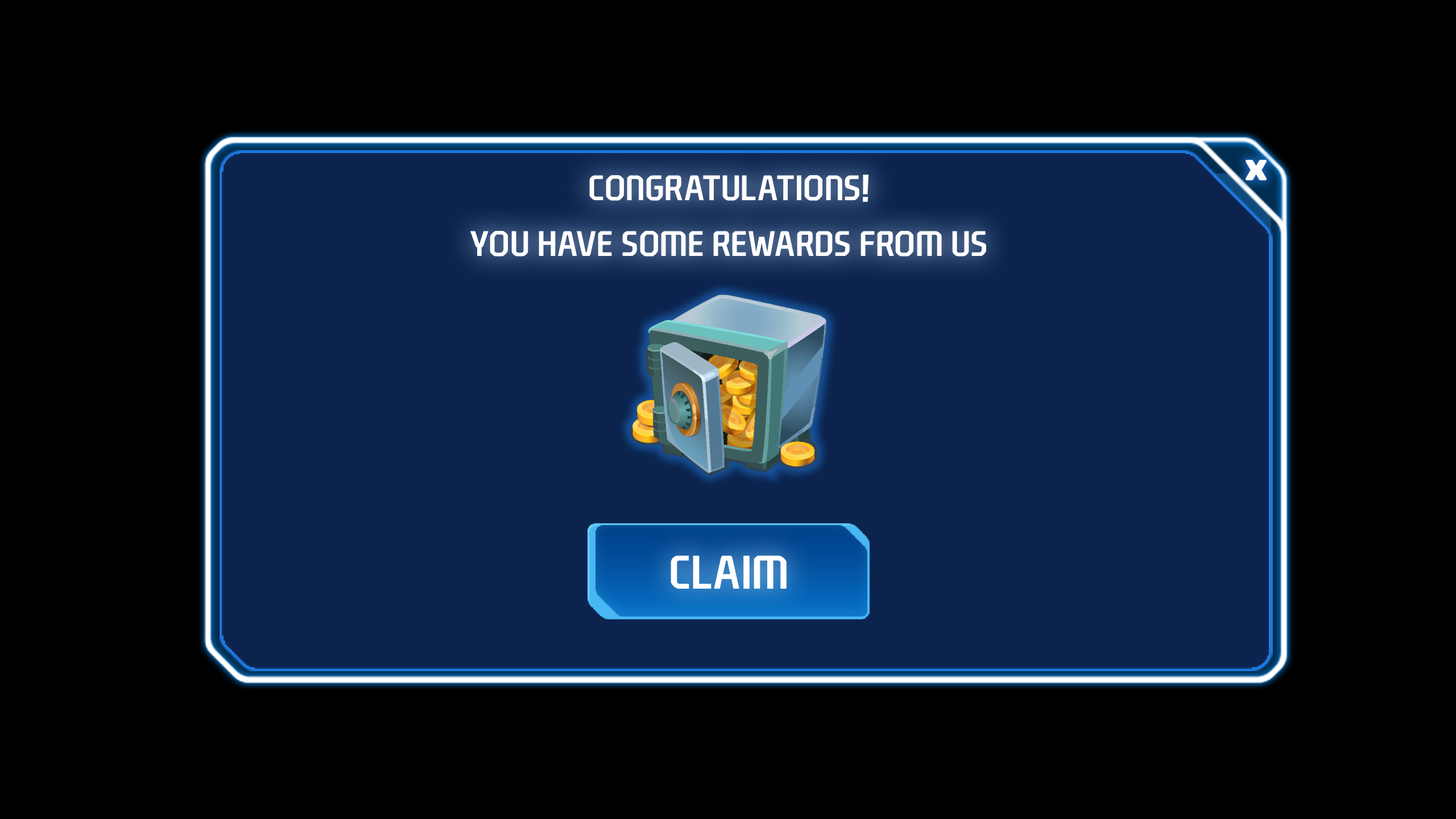
<style>
.page{position:relative;width:1456px;height:819px;background:#000000}
.page>*{position:absolute;margin:0}
.t1{font:34.1px/55.9px "NEXONFootballGothicB";color:#ffffff;text-transform:uppercase;scale:0.92 1}
.t2{font:45.5px "NEXONFootballGothicB";color:#ffffff;text-transform:uppercase;scale:0.92 1}
</style>
<div class="page">
<p class="t1" style="left:470px;top:175px;width:516px;height:82px;text-align:center">Congratulations!<br>you have some rewards from us</p>
<p class="t2" style="left:671px;top:556px;width:116px;height:33px">Claim</p>
</div>
